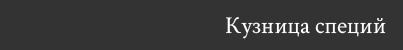
<style>
.page{position:relative;width:403px;height:50px;background:#333333}
.page>*{position:absolute;margin:0}
.t1{font:24px "CrimsonText-Regular";color:#ffffff}
</style>
<div class="page">
<p class="t1" style="left:226px;top:17px;width:160px;height:22px">Кузница специй</p>
</div>
